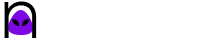
<style>
.page{position:relative;width:204px;height:40px;background:#ffffff}
.page>*{position:absolute;margin:0}
.t1{font:72.3px "NexaDemo-Light";letter-spacing:0.025em;color:#000000;scale:0.97 1}
</style>
<div class="page">
<p class="t1" style="left:4px;top:1px;width:33px;height:37px">n</p>
</div>
